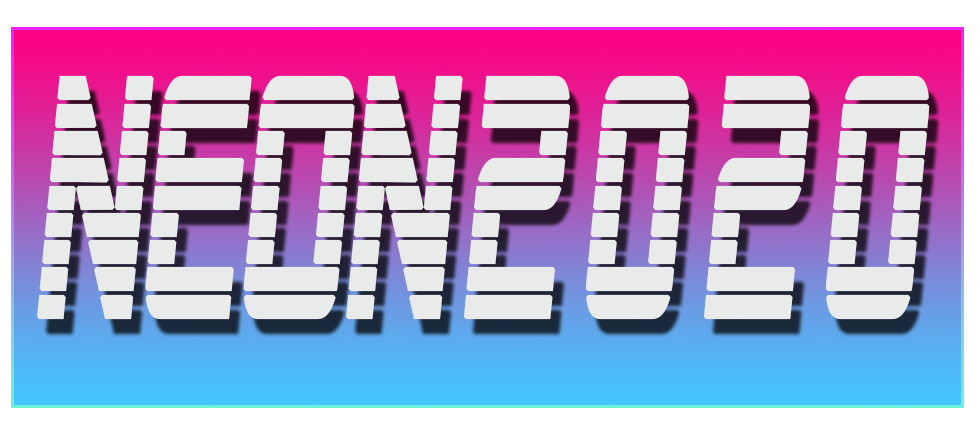
<style>
.page{position:relative;width:980px;height:438px;background:#e9eaea}
.page>*{position:absolute;margin:0}
.t1{font:341.2px "SFAlienEncounters-Italic";color:#e9eaea;font-weight:bold;scale:0.44 1}
</style>
<div class="page">
<p class="t1" style="left:37px;top:75px;width:893px;height:245px">NEON2020</p>
</div>
